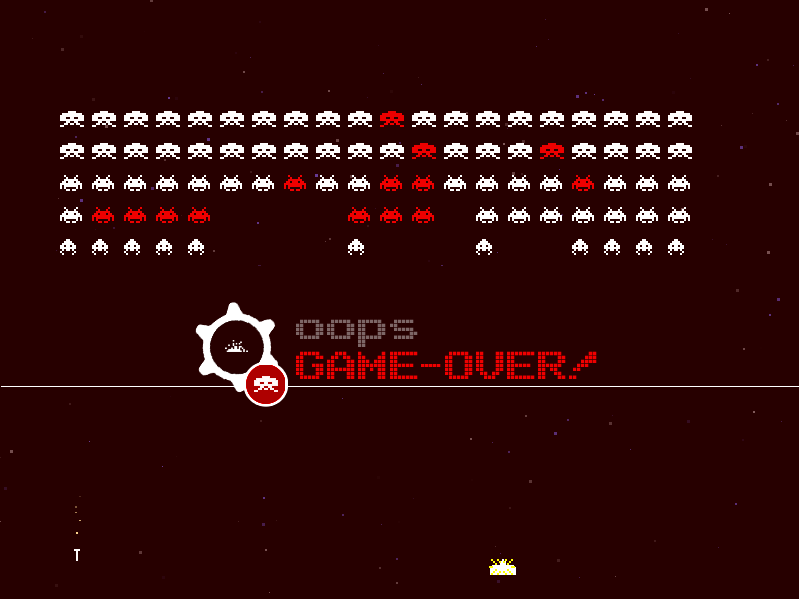
<style>
.page{position:relative;width:799px;height:599px;background:#270000}
.page>*{position:absolute;margin:0}
.t1{font:60px "Arcade";color:#7d6666}
.t2{font:60px "Arcade";color:#ef0000}
</style>
<div class="page">
<p class="t1" style="left:296px;top:319px;width:122px;height:28px">oops</p>
<p class="t2" style="left:296px;top:351px;width:301px;height:28px">GAME-OVER!</p>
</div>
